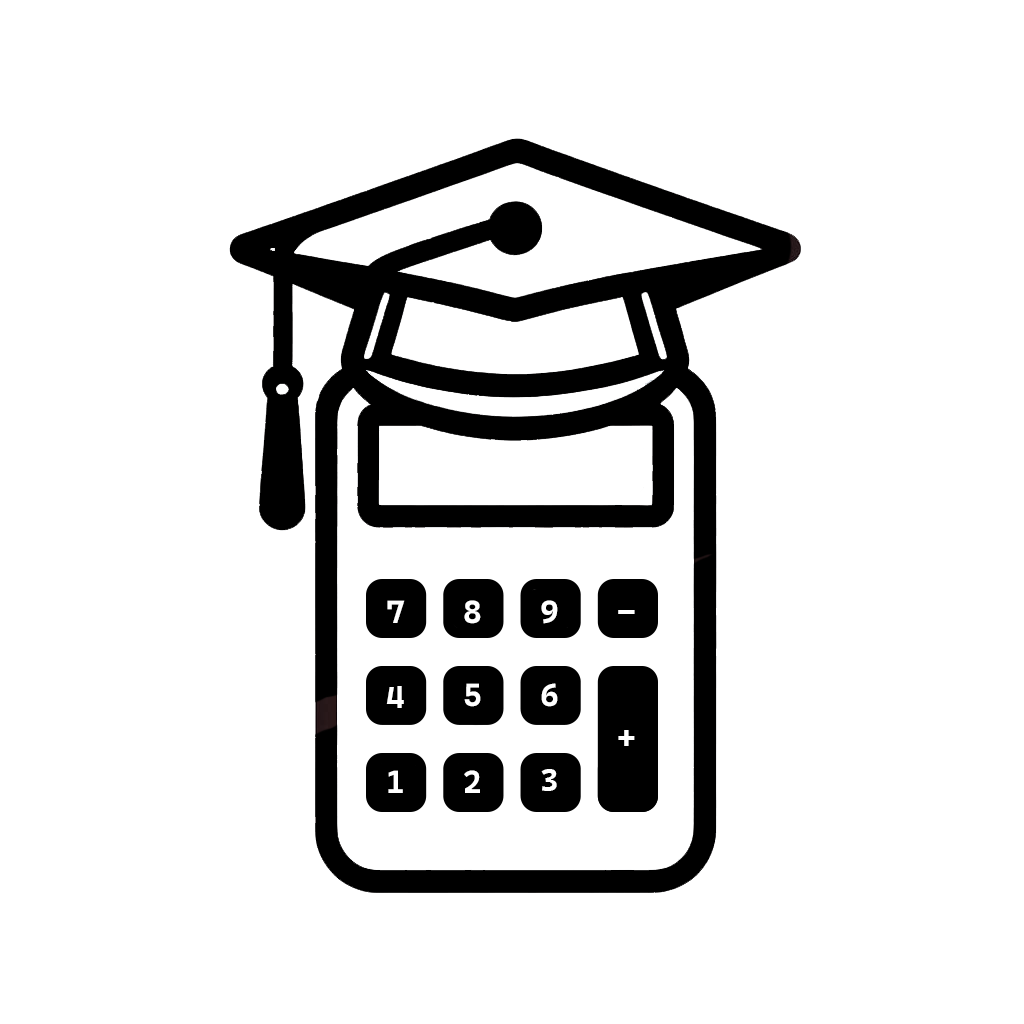
<style>
.page{position:relative;width:1024px;height:1024px;background:#ffffff}
.page>*{position:absolute;margin:0}
.t1{font:32px "CascadiaMonoRoman-Bold";color:#ffffff}
</style>
<div class="page">
<p class="t1" style="left:387px;top:600px;width:18px;height:23px">7</p>
<p class="t1" style="left:464px;top:600px;width:17px;height:24px">8</p>
<p class="t1" style="left:541px;top:600px;width:17px;height:24px">9</p>
<p class="t1" style="left:618px;top:610px;width:17px;height:4px">-</p>
<p class="t1" style="left:386px;top:686px;width:18px;height:22px">4</p>
<p class="t1" style="left:464px;top:683px;width:17px;height:24px">5</p>
<p class="t1" style="left:541px;top:683px;width:17px;height:24px">6</p>
<p class="t1" style="left:618px;top:730px;width:17px;height:16px">+</p>
<p class="t1" style="left:388px;top:770px;width:15px;height:23px">1</p>
<p class="t1" style="left:464px;top:770px;width:16px;height:23px">2</p>
<p class="t1" style="left:541px;top:769px;width:16px;height:22px">3</p>
</div>
